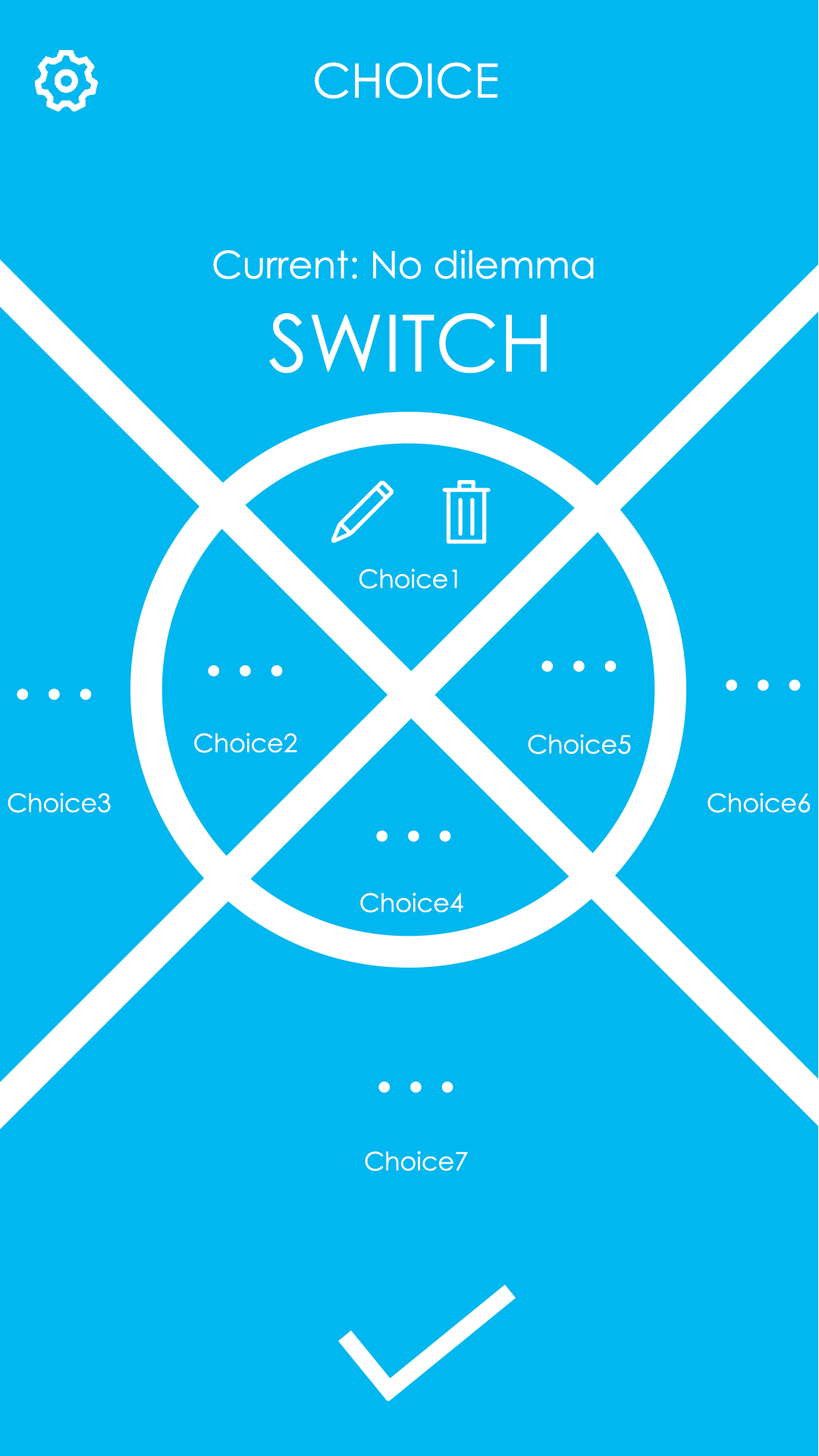
<style>
.page{position:relative;width:819px;height:1456px;background:#00b7ef}
.page>*{position:absolute;margin:0}
.t1{font:47.4px "CenturyGothic";color:#ffffff}
.t2{font:9.1px "CenturyGothic";color:#ffffff}
.t3{font:79px "CenturyGothic";color:#ffffff}
.t4{font:25.3px "CenturyGothic";color:#ffffff}
.t5{font:94.8px "CenturyGothic";color:#ffffff}
</style>
<div class="page">
<p class="t1" style="left:315px;top:62px;width:183px;height:37px">CHOICE</p>
<p class="t2" style="left:213px;top:249px;width:381px;height:30px">Current: No dilemma</p>
<p class="t3" style="left:269px;top:313px;width:278px;height:60px">SWITCH</p>
<p class="t4" style="left:359px;top:569px;width:98px;height:19px">Choice1</p>
<p class="t5" style="left:208px;top:665px;width:75px;height:11px">···</p>
<p class="t5" style="left:541px;top:660px;width:76px;height:12px">···</p>
<p class="t5" style="left:17px;top:689px;width:75px;height:11px">···</p>
<p class="t5" style="left:726px;top:679px;width:75px;height:12px">···</p>
<p class="t4" style="left:194px;top:733px;width:103px;height:20px">Choice2</p>
<p class="t4" style="left:528px;top:734px;width:103px;height:21px">Choice5</p>
<p class="t4" style="left:8px;top:792px;width:103px;height:21px">Choice3</p>
<p class="t4" style="left:708px;top:792px;width:102px;height:21px">Choice6</p>
<p class="t5" style="left:376px;top:830px;width:75px;height:12px">···</p>
<p class="t4" style="left:360px;top:893px;width:103px;height:20px">Choice4</p>
<p class="t5" style="left:378px;top:1081px;width:75px;height:12px">···</p>
<p class="t4" style="left:365px;top:1151px;width:103px;height:20px">Choice7</p>
</div>
